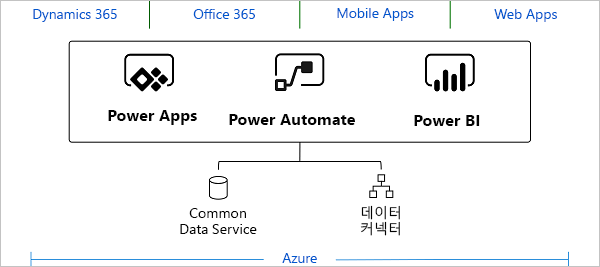
<style>
.page{position:relative;width:600px;height:267px;background:#ffffff}
.page>*{position:absolute;margin:0}
.t1{font:13.9px "SegoeUI";color:#0057cd}
.t2{font:16.1px "SegoeUI-Bold";color:#020202}
.t3{font:13.9px "SegoeUI";color:#020202}
.t4{font:13.9px "MalgunGothic";color:#020202}
</style>
<div class="page">
<p class="t1" style="left:33px;top:9px;width:84px;height:13px">Dynamics 365</p>
<p class="t1" style="left:193px;top:9px;width:62px;height:10px">Office 365</p>
<p class="t1" style="left:337px;top:8px;width:77px;height:13px">Mobile Apps</p>
<p class="t1" style="left:494px;top:9px;width:63px;height:13px">Web Apps</p>
<p class="t2" style="left:108px;top:110px;width:89px;height:15px">Power Apps</p>
<p class="t2" style="left:229px;top:114px;width:126px;height:11px">Power Automate</p>
<p class="t2" style="left:414px;top:115px;width:66px;height:11px">Power BI</p>
<p class="t3" style="left:180px;top:208px;width:77px;height:26px;text-align:center">Common Data Service</p>
<p class="t4" style="left:360px;top:205px;width:40px;height:31px;text-align:center">데이터 커넥터</p>
<p class="t1" style="left:282px;top:253px;width:35px;height:10px">Azure</p>
</div>
